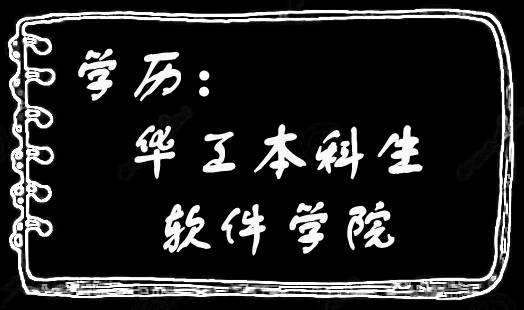
<style>
.page{position:relative;width:524px;height:310px;background:#000000}
.page>*{position:absolute;margin:0}
.t1{font:60px "FZSTK--GBK1-0";color:#faf8f8;font-weight:bold}
</style>
<div class="page">
<p class="t1" style="left:78px;top:48px;width:132px;height:54px">学历：</p>
<p class="t1" style="left:134px;top:124px;width:289px;height:56px">华工本科生</p>
<p class="t1" style="left:163px;top:201px;width:232px;height:55px">软件学院</p>
</div>
